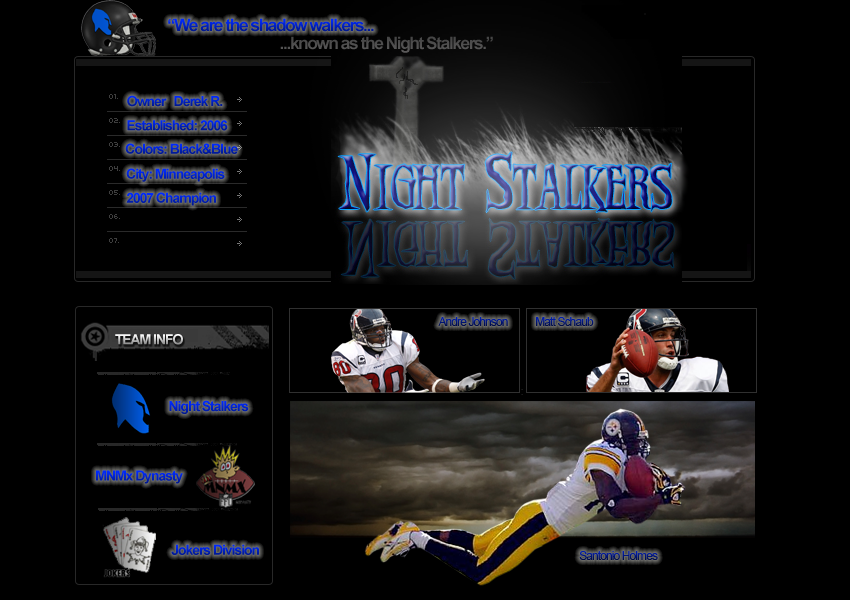
<style>
.page{position:relative;width:850px;height:600px;background:#000000}
.page>*{position:absolute;margin:0}
.t1{font:17px "Arial-BoldMT";letter-spacing:-0.075em}
.t2{font:17px "Arial-BoldMT";letter-spacing:-0.075em;color:#5c5b5b}
.t3{font:14px "Arial-BoldMT";letter-spacing:-0.075em}
.t4{font:12px "ArialMT";letter-spacing:-0.075em}
</style>
<div class="page">
<p class="t1" style="left:168px;top:18px;width:206px;height:14px">“We are the shadow walkers...</p>
<p class="t2" style="left:280px;top:36px;width:213px;height:17px">...known as the Night Stalkers.”</p>
<p class="t3" style="left:127px;top:95px;width:96px;height:12px">Owner   Derek R.</p>
<p class="t3" style="left:127px;top:120px;width:101px;height:11px">Established: 2006</p>
<p class="t3" style="left:125px;top:143px;width:113px;height:11px">Colors: Black&amp;Blue</p>
<p class="t3" style="left:126px;top:168px;width:99px;height:14px">City: Minneapolis</p>
<p class="t3" style="left:126px;top:192px;width:90px;height:14px">2007 Champion</p>
<p class="t4" style="left:438px;top:317px;width:70px;height:9px">Andre Johnson</p>
<p class="t4" style="left:536px;top:317px;width:58px;height:9px">Matt Schaub</p>
<p class="t3" style="left:115px;top:334px;width:68px;height:11px">TEAM INFO</p>
<p class="t3" style="left:169px;top:400px;width:80px;height:14px">Night Stalkers</p>
<p class="t3" style="left:96px;top:470px;width:87px;height:14px">MNMx Dynasty</p>
<p class="t3" style="left:171px;top:544px;width:88px;height:11px">Jokers Division</p>
<p class="t4" style="left:579px;top:551px;width:79px;height:9px">Santonio Holmes</p>
</div>
